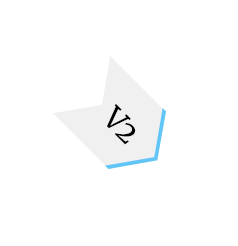
<style>
.page{position:relative;width:238px;height:246px;background:#ffffff}
.page>*{position:absolute;margin:0}
.t1{font:30px "Merriweather-Regular";letter-spacing:-0.06em;color:#000000}
</style>
<div class="page">
<p class="t1" style="left:107px;top:104px;width:29px;height:41px;rotate:45deg">V2</p>
</div>
